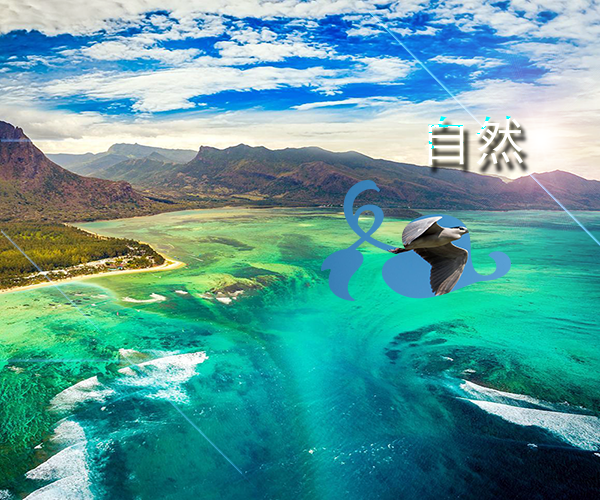
<style>
.page{position:relative;width:600px;height:500px}
.page>*{position:absolute;margin:0}
.t1{font:53.3px "DengXian";color:#ffffff}
</style>
<div class="page">
<p class="t1" style="left:428px;top:115px;width:95px;height:50px">自然</p>
</div>
